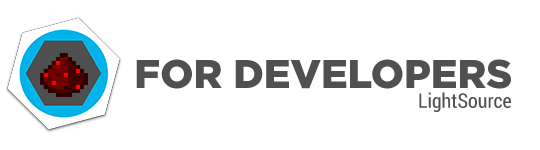
<style>
.page{position:relative;width:540px;height:150px;background:#ffffff}
.page>*{position:absolute;margin:0}
.t1{font:40px "GothamPro-Black";color:#505050}
.t2{font:20px "RobotoCondensed-Regular";color:#505050}
</style>
<div class="page">
<p class="t1" style="left:136px;top:59px;width:375px;height:30px">FOR DEVELOPERS</p>
<p class="t2" style="left:419px;top:92px;width:92px;height:20px">LightSource</p>
</div>
